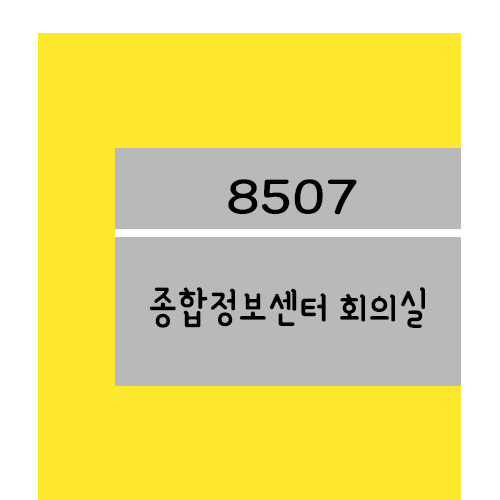
<style>
.page{position:relative;width:500px;height:500px;background:#fee82d}
.page>*{position:absolute;margin:0}
.t1{font:61.2px "YanoljaYacheR";color:#000000;scale:1.18 1}
.t2{font:48px "YanoljaYacheR";color:#000000}
</style>
<div class="page">
<p class="t1" style="left:228px;top:179px;width:129px;height:36px">8507</p>
<p class="t2" style="left:149px;top:287px;width:276px;height:41px">종합정보센터 회의실</p>
</div>
